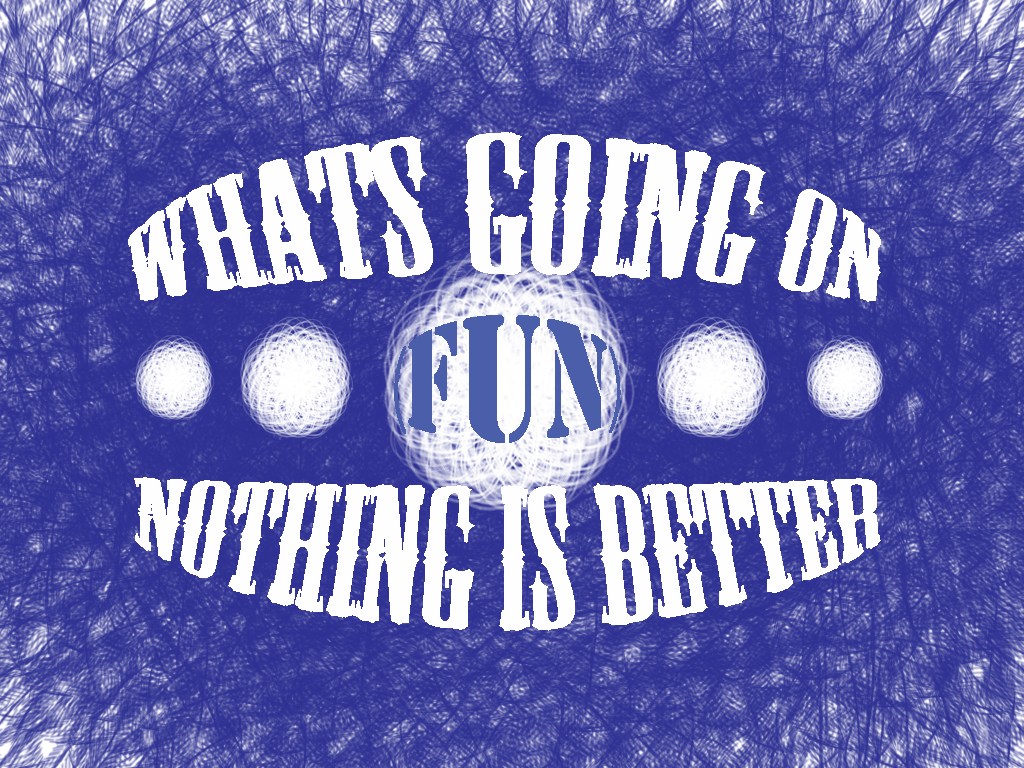
<style>
.page{position:relative;width:1024px;height:768px}
.page>*{position:absolute;margin:0}
.t1{font:85.5px "MesquiteStd";color:#fffefe;scale:2.46 1}
.t2{font:47.7px "StencilStd";color:#4a5eaa;scale:1.62 1}
.t3{font:85.5px "MesquiteStd";color:#fffefe;scale:2.13 1}
</style>
<div class="page">
<p class="t1" style="left:128px;top:132px;width:753px;height:170px">whats going on</p>
<p class="t2" style="left:394px;top:315px;width:227px;height:128px">(Fun)</p>
<p class="t3" style="left:134px;top:477px;width:747px;height:154px">nothing is better</p>
</div>
